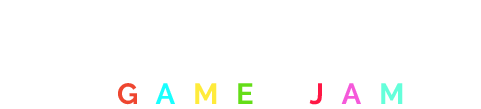
<style>
.page{position:relative;width:481px;height:109px;background:#ffffff}
.page>*{position:absolute;margin:0}
.t1{font:29.4px "Raleway-Bold";letter-spacing:0.6em;color:#ee4630}
.t2{font:29.4px "Raleway-Bold";letter-spacing:0.6em;color:#18ffff}
.t3{font:29.4px "Raleway-Bold";letter-spacing:0.6em;color:#ffeb3b}
.t4{font:29.4px "Raleway-Bold";letter-spacing:0.25em;color:#64dd17}
.t5{font:29.4px "Raleway-Bold";letter-spacing:0.25em;color:#ffffff}
.t6{font:29.4px "Raleway-Bold";letter-spacing:0.6em;color:#ff1744}
.t7{font:29.4px "Raleway-Bold";letter-spacing:0.6em;color:#f559da}
.t8{font:29.4px "Raleway-Bold";letter-spacing:0.6em;color:#64ffda}
</style>
<div class="page">
<p class="t1" style="left:118px;top:83px;width:285px;height:22px">G<span class="t2">A</span><span class="t3">M</span><span class="t4">E</span><span class="t5"> - </span><span class="t6">J</span><span class="t7">A</span><span class="t8">M</span></p>
</div>
